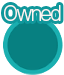
<style>
.page{position:relative;width:64px;height:75px;background:#078081}
.page>*{position:absolute;margin:0}
.t1{font:20px "GothicMB101Pro-Light";letter-spacing:-0.08em;color:#fff6f3;scale:0.9 1}
</style>
<div class="page">
<p class="t1" style="left:4px;top:5px;width:57px;height:16px">Owned</p>
</div>
